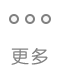
<style>
.page{position:relative;width:60px;height:80px;background:#ffffff}
.page>*{position:absolute;margin:0}
.t1{font:18px "STYuanti-SC-Regular";letter-spacing:0.1em;color:#808080}
</style>
<div class="page">
<p class="t1" style="left:11px;top:48px;width:37px;height:17px">更多</p>
</div>
